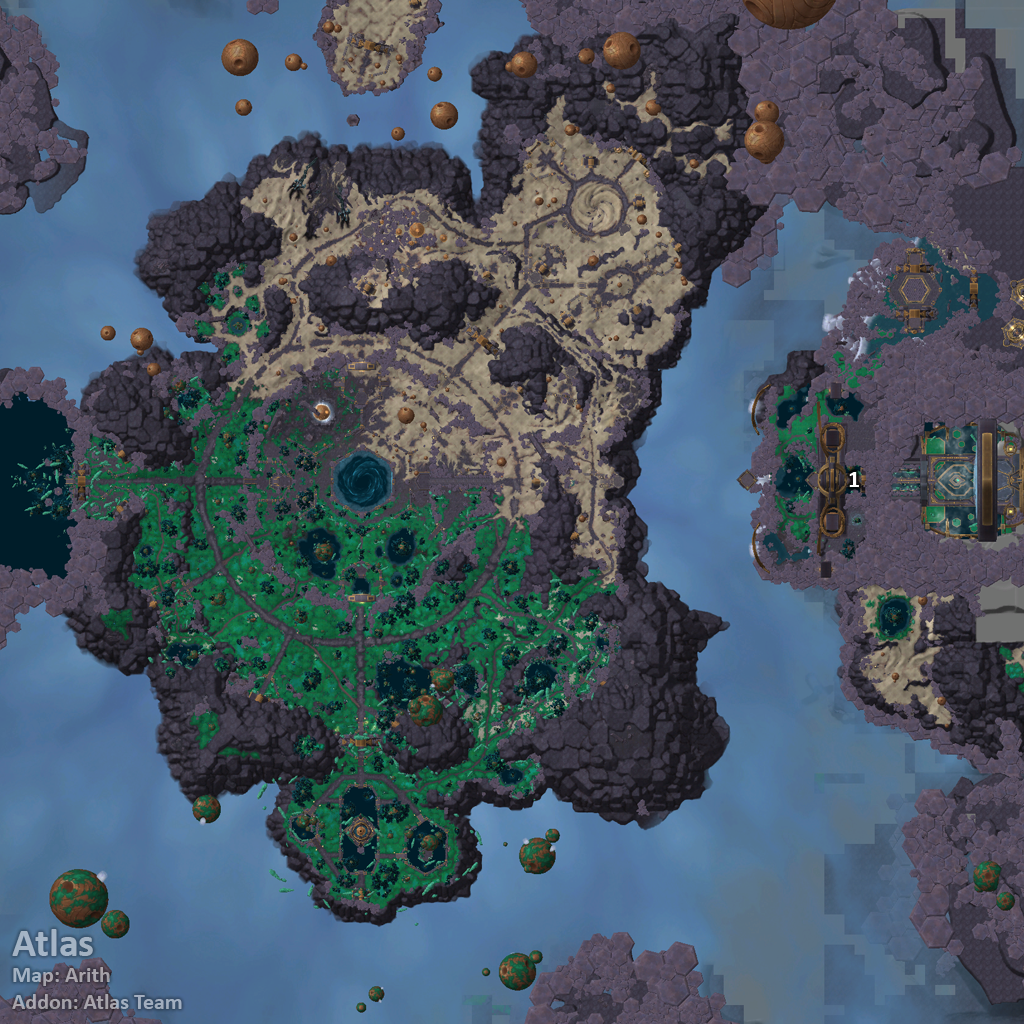
<style>
.page{position:relative;width:1024px;height:1024px}
.page>*{position:absolute;margin:0}
.t1{font:24px "Calibri-Bold";color:#ffffff}
.t2{font:22px "Calibri-Bold";color:#a4b0c1}
.t3{font:40px "Calibri-Bold";color:#a4b0c1}
</style>
<div class="page">
<p class="t1" style="left:849px;top:472px;width:10px;height:15px">1</p>
<p class="t2" style="left:12px;top:929px;width:170px;height:80px"><span class="t3">Atlas<br></span>Map: Arith<br>Addon: Atlas Team</p>
</div>
